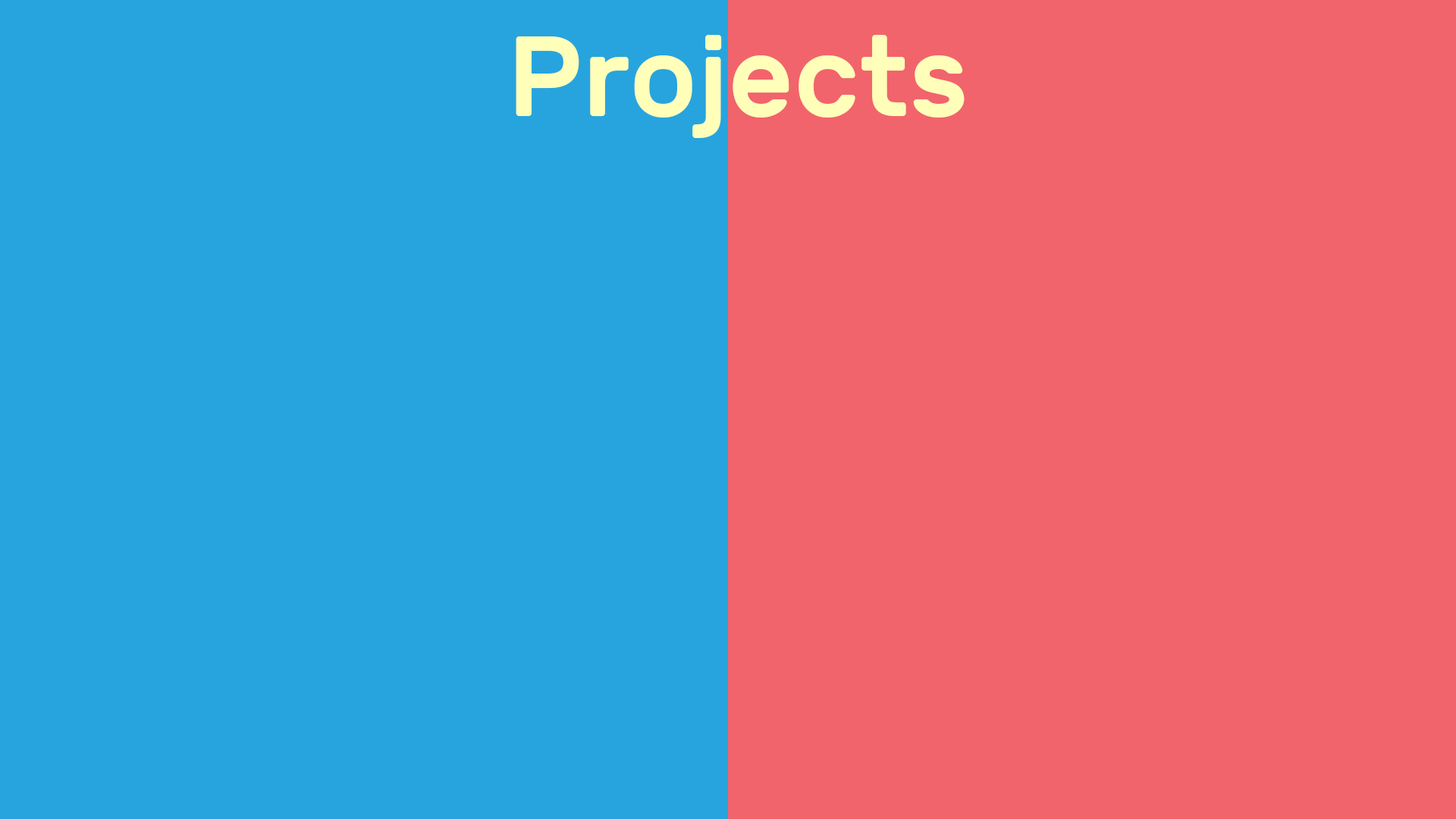
<style>
.page{position:relative;width:1456px;height:819px;background:#27a4dd}
.page>*{position:absolute;margin:0}
.t1{font:113.7px "Rubik-Medium";color:#ffffba}
</style>
<div class="page">
<p class="t1" style="left:516px;top:35px;width:449px;height:103px">Projects</p>
</div>
